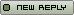
<style>
.page{position:relative;width:74px;height:15px}
.page>*{position:absolute;margin:0}
.t1{font:8px "BitDustTwo";color:#000000}
</style>
<div class="page">
<p class="t1" style="left:17px;top:5px;width:49px;height:5px">NEW REPLY</p>
</div>
